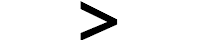
<style>
.page{position:relative;width:200px;height:40px;background:#ffffff}
.page>*{position:absolute;margin:0}
.t1{font:80px "MalgunGothicBold";color:#000000}
</style>
<div class="page">
<p class="t1" style="left:80px;top:1px;width:38px;height:40px">&gt;</p>
</div>
